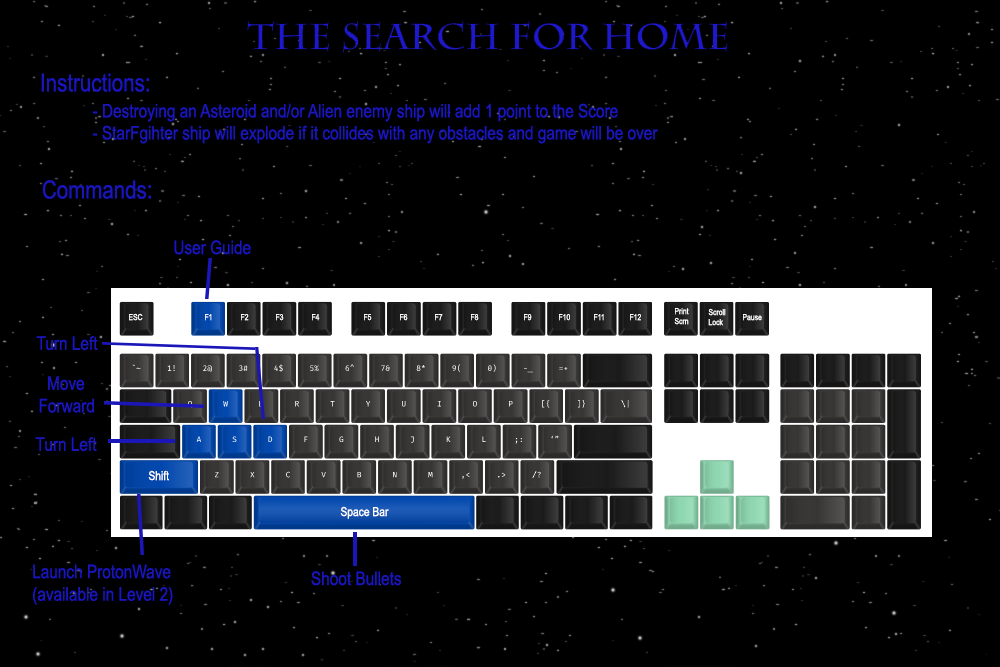
<style>
.page{position:relative;width:1000px;height:667px;background:#000000}
.page>*{position:absolute;margin:0}
.t1{font:25px "ArialNarrow";color:#1a16b8}
.t2{font:18.8px "ArialNarrow";color:#1a16b8}
.t3{font:8.3px "ArialNarrow";color:#ffffff}
.t4{font:12.5px "ArialNarrow";color:#ffffff}
</style>
<div class="page">
<p class="t1" style="left:41px;top:73px;width:108px;height:19px">Instructions:</p>
<p class="t2" style="left:93px;top:103px;width:525px;height:19px">- Destroying an Asteroid and/or Alien enemy ship will add 1 point to the Score</p>
<p class="t2" style="left:93px;top:125px;width:565px;height:19px">- StarFgihter ship will explode if it collides with any obstacles and game will be over</p>
<p class="t1" style="left:42px;top:180px;width:109px;height:19px">Commands:</p>
<p class="t2" style="left:174px;top:240px;width:77px;height:15px">User Guide</p>
<p class="t3" style="left:129px;top:313px;width:14px;height:8px">ESC</p>
<p class="t3" style="left:205px;top:314px;width:7px;height:7px">F1</p>
<p class="t3" style="left:241px;top:314px;width:8px;height:7px">F2</p>
<p class="t3" style="left:276px;top:314px;width:8px;height:7px">F3</p>
<p class="t3" style="left:312px;top:314px;width:8px;height:7px">F4</p>
<p class="t3" style="left:364px;top:314px;width:8px;height:7px">F5</p>
<p class="t3" style="left:400px;top:314px;width:8px;height:7px">F6</p>
<p class="t3" style="left:435px;top:314px;width:8px;height:7px">F7</p>
<p class="t3" style="left:471px;top:314px;width:8px;height:7px">F8</p>
<p class="t3" style="left:524px;top:314px;width:8px;height:7px">F9</p>
<p class="t3" style="left:559px;top:314px;width:11px;height:7px">F10</p>
<p class="t3" style="left:594px;top:314px;width:10px;height:7px">F11</p>
<p class="t3" style="left:630px;top:314px;width:11px;height:7px">F12</p>
<p class="t3" style="left:674px;top:308px;width:15px;height:17px">Print<br>Scrn</p>
<p class="t3" style="left:708px;top:308px;width:18px;height:18px">Scroll<br>Lock</p>
<p class="t3" style="left:743px;top:314px;width:19px;height:7px">Pause</p>
<p class="t2" style="left:36px;top:336px;width:62px;height:15px">Turn Left</p>
<p class="t2" style="left:39px;top:376px;width:55px;height:37px">Move<br>Forward</p>
<p class="t2" style="left:35px;top:437px;width:62px;height:15px">Turn Left</p>
<p class="t4" style="left:148px;top:470px;width:21px;height:11px">Shift</p>
<p class="t4" style="left:340px;top:506px;width:49px;height:13px">Space Bar</p>
<p class="t2" style="left:33px;top:564px;width:140px;height:41px">Launch ProtonWave<br>(available in Level 2)</p>
<p class="t2" style="left:311px;top:571px;width:90px;height:15px">Shoot Bullets</p>
</div>
